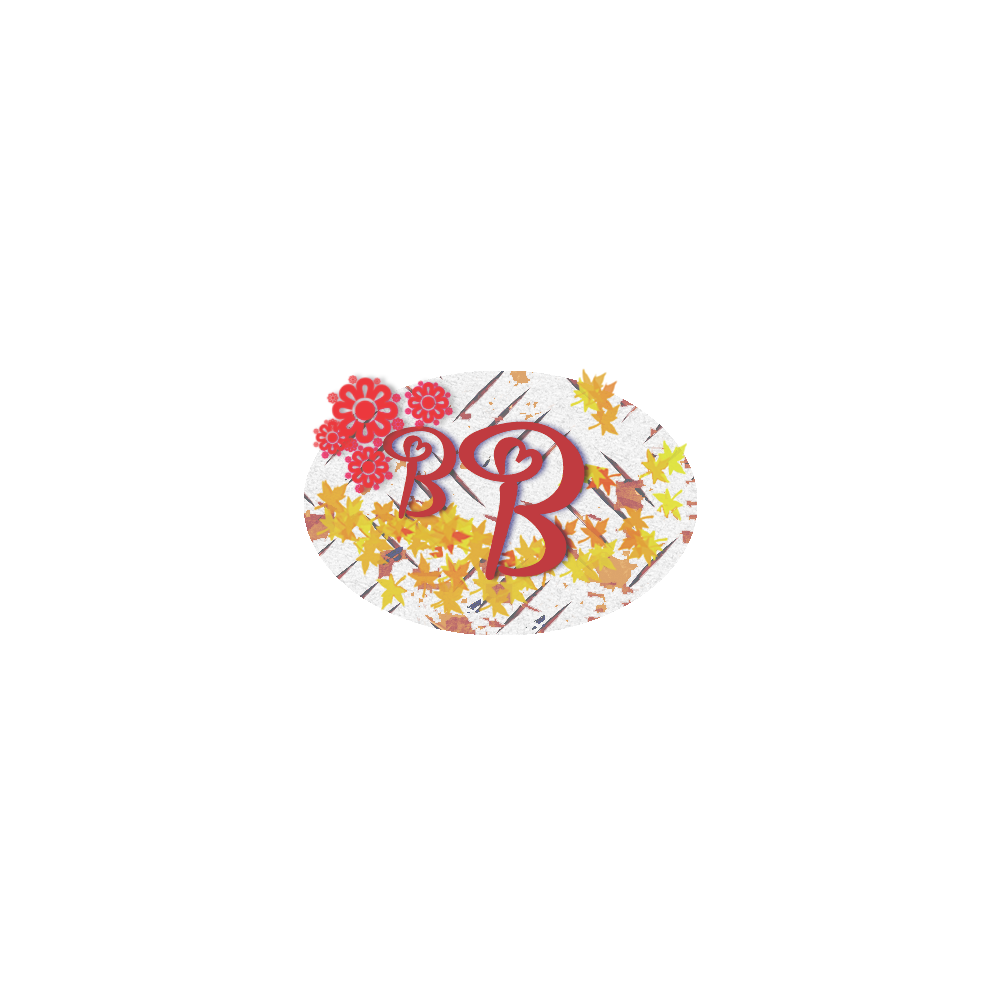
<style>
.page{position:relative;width:1000px;height:1000px;background:#ffffff}
.page>*{position:absolute;margin:0}
.t1{font:157.1px "Bigdey-Demo";letter-spacing:0.005em;color:#b6422e;font-weight:bold;scale:1.07 1}
.t2{font:157.1px "Bigdey-Demo";letter-spacing:0.005em;color:#b6422e;font-variant:small-caps;font-weight:bold;scale:1.07 1}
</style>
<div class="page">
<p class="t1" style="left:382px;top:421px;width:203px;height:159px">B<span class="t2">B</span></p>
</div>
